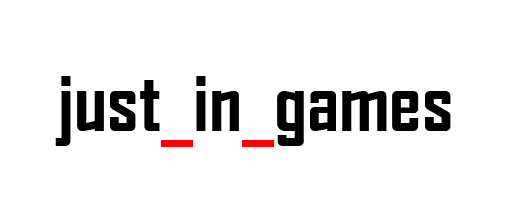
<style>
.page{position:relative;width:505px;height:216px;background:#ffffff}
.page>*{position:absolute;margin:0}
.t1{font:80.9px "AgencyFB-Bold";color:#000000}
.t2{font:80.9px "AgencyFB-Bold";color:#ff0000}
</style>
<div class="page">
<p class="t1" style="left:55px;top:76px;width:396px;height:71px">just<span class="t2">_</span>in<span class="t2">_</span>games</p>
</div>
